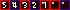
<style>
.page{position:relative;width:70px;height:10px;background:#1c0a00}
.page>*{position:absolute;margin:0}
.t1{font:8px "MyriadPro-Regular";color:#ffffff}
</style>
<div class="page">
<p class="t1" style="left:3px;top:2px;width:3px;height:6px">5</p>
<p class="t1" style="left:13px;top:2px;width:4px;height:6px">4</p>
<p class="t1" style="left:24px;top:2px;width:3px;height:6px">3</p>
<p class="t1" style="left:33px;top:2px;width:3px;height:6px">2</p>
<p class="t1" style="left:44px;top:2px;width:2px;height:6px">1</p>
</div>
